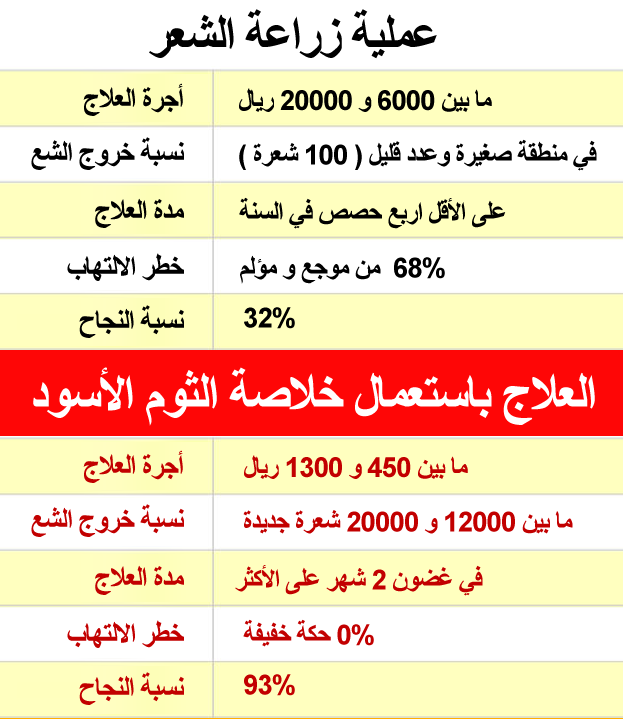
<style>
.page{position:relative;width:623px;height:719px;background:#ffffff}
.page>*{position:absolute;margin:0}
.t1{font:51.2px "Arial-BoldMT";letter-spacing:-0.04em;color:#000000}
.t2{font:30px "Arial-BoldMT";letter-spacing:-0.04em;color:#000000}
.t3{font:28px "Arial-BoldMT";letter-spacing:-0.04em;color:#000000}
.t4{font:53.5px "Arial-BoldMT";letter-spacing:-0.04em;color:#ffffff}
.t5{font:30px "Arial-BoldMT";letter-spacing:-0.04em;color:#c20000}
.t6{font:28px "Arial-BoldMT";letter-spacing:-0.04em;color:#c20000}
</style>
<div class="page">
<p class="t1" style="left:149px;top:9px;width:288px;height:50px">ﺮﻌﺸﻟﺍ ﺔﻋﺍﺭﺯ ﺔﻴﻠﻤﻋ</p>
<p class="t2" style="left:83px;top:83px;width:100px;height:33px">ﺝﻼﻌﻟﺍ ﺓﺮﺟﺃ</p>
<p class="t3" style="left:239px;top:88px;width:253px;height:24px">ﻝﺎﻳﺭ 20000 ﻭ 6000 ﻦﻴﺑ ﺎﻣ</p>
<p class="t2" style="left:31px;top:137px;width:153px;height:33px">ﻊﺸﻟﺍ ﺝﻭﺮﺧ ﺔﺒﺴﻧ</p>
<p class="t3" style="left:239px;top:139px;width:358px;height:32px">( ﺓﺮﻌﺷ 100 ) ﻞﻴﻠﻗ ﺩﺪﻋﻭ ﺓﺮﻴﻐﺻ ﺔﻘﻄﻨﻣ ﻲﻓ</p>
<p class="t2" style="left:95px;top:198px;width:89px;height:30px">ﺝﻼﻌﻟﺍ ﺓﺪﻣ</p>
<p class="t3" style="left:239px;top:197px;width:267px;height:32px">ﺔﻨﺴﻟﺍ ﻲﻓ ﺺﺼﺣ ﻊﺑﺭﺍ ﻞﻗﻷﺍ ﻰﻠﻋ</p>
<p class="t2" style="left:67px;top:253px;width:117px;height:28px">ﺏﺎﻬﺘﻟﻻﺍ ﺮﻄﺧ</p>
<p class="t3" style="left:240px;top:255px;width:205px;height:29px">ﻢﻟﺆﻣ ﻭ ﻊﺟﻮﻣ ﻦﻣ  68%</p>
<p class="t2" style="left:79px;top:305px;width:105px;height:33px">ﺡﺎﺠﻨﻟﺍ ﺔﺒﺴﻧ</p>
<p class="t3" style="left:244px;top:307px;width:51px;height:22px">32%</p>
<p class="t4" style="left:33px;top:367px;width:562px;height:59px">ﺩﻮﺳﻷﺍ ﻡﻮﺜﻟﺍ ﺔﺻﻼﺧ ﻝﺎﻤﻌﺘﺳﺎﺑ ﺝﻼﻌﻟﺍ</p>
<p class="t5" style="left:83px;top:450px;width:100px;height:33px">ﺝﻼﻌﻟﺍ ﺓﺮﺟﺃ</p>
<p class="t6" style="left:244px;top:455px;width:224px;height:24px">ﻝﺎﻳﺭ 1300 ﻭ 450 ﻦﻴﺑ ﺎﻣ</p>
<p class="t5" style="left:31px;top:504px;width:153px;height:33px">ﻊﺸﻟﺍ ﺝﻭﺮﺧ ﺔﺒﺴﻧ</p>
<p class="t6" style="left:243px;top:510px;width:330px;height:24px">ﺓﺪﻳﺪﺟ ﺓﺮﻌﺷ 20000 ﻭ 12000 ﻦﻴﺑ ﺎﻣ</p>
<p class="t5" style="left:95px;top:565px;width:89px;height:30px">ﺝﻼﻌﻟﺍ ﺓﺪﻣ</p>
<p class="t6" style="left:235px;top:565px;width:248px;height:31px">ﺮﺜﻛﻷﺍ ﻰﻠﻋ ﺮﻬﺷ 2 ﻥﻮﻀﻏ ﻲﻓ</p>
<p class="t5" style="left:67px;top:620px;width:117px;height:28px">ﺏﺎﻬﺘﻟﻻﺍ ﺮﻄﺧ</p>
<p class="t6" style="left:243px;top:619px;width:131px;height:28px">ﺔﻔﻴﻔﺧ ﺔﻜﺣ 0%</p>
<p class="t5" style="left:79px;top:672px;width:105px;height:33px">ﺡﺎﺠﻨﻟﺍ ﺔﺒﺴﻧ</p>
<p class="t6" style="left:244px;top:674px;width:51px;height:22px">93%</p>
</div>
